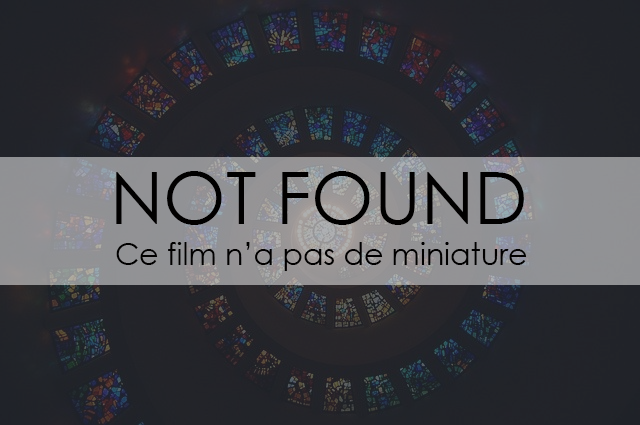
<style>
.page{position:relative;width:640px;height:425px}
.page>*{position:absolute;margin:0}
.t1{font:72px "CenturyGothic";color:#010000}
.t2{font:30px "CenturyGothic";color:#010000}
</style>
<div class="page">
<p class="t1" style="left:116px;top:171px;width:408px;height:54px">NOT FOUND</p>
<p class="t2" style="left:116px;top:242px;width:411px;height:29px">Ce film n’a pas de miniature</p>
</div>
